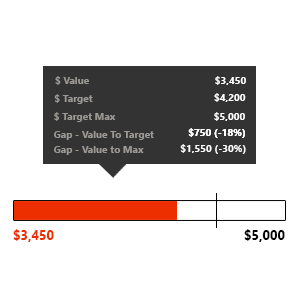
<style>
.page{position:relative;width:300px;height:300px;background:#ffffff}
.page>*{position:absolute;margin:0}
.t1{font:10px "SegoeUI-Bold";color:#9c9995}
.t2{font:10px "SegoeUI-Bold";color:#ffffff}
.t3{font:13px "SegoeUI-Bold";color:#ed2f00}
.t4{font:13px "SegoeUI-Bold";color:#030303}
</style>
<div class="page">
<p class="t1" style="left:55px;top:76px;width:34px;height:9px">$ Value</p>
<p class="t2" style="left:215px;top:76px;width:31px;height:9px">$3,450</p>
<p class="t1" style="left:54px;top:94px;width:39px;height:10px">$ Target</p>
<p class="t2" style="left:214px;top:93px;width:32px;height:9px">$4,200</p>
<p class="t1" style="left:54px;top:112px;width:62px;height:10px">$ Target Max</p>
<p class="t2" style="left:214px;top:112px;width:31px;height:9px">$5,000</p>
<p class="t1" style="left:54px;top:131px;width:100px;height:9px">Gap - Value To Target</p>
<p class="t2" style="left:188px;top:128px;width:57px;height:10px">$750 (-18%)</p>
<p class="t2" style="left:188px;top:128px;width:57px;height:10px">$750 (-18%)</p>
<p class="t1" style="left:54px;top:146px;width:90px;height:9px">Gap - Value to Max</p>
<p class="t2" style="left:180px;top:144px;width:66px;height:10px">$1,550 (-30%)</p>
<p class="t3" style="left:13px;top:229px;width:41px;height:13px">$3,450</p>
<p class="t4" style="left:244px;top:229px;width:41px;height:13px">$5,000</p>
</div>
